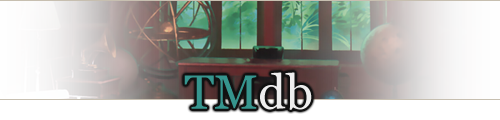
<style>
.page{position:relative;width:500px;height:120px}
.page>*{position:absolute;margin:0}
.t1{font:48px "Georgia";color:#36958e}
.t2{font:48px "Georgia";color:#eeeeee}
</style>
<div class="page">
<p class="t1" style="left:184px;top:72px;width:128px;height:38px">TM<span class="t2">db</span></p>
</div>
